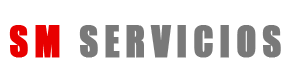
<style>
.page{position:relative;width:300px;height:80px;background:#ffffff}
.page>*{position:absolute;margin:0}
.t1{font:40px "Impact";letter-spacing:0.15em;color:#797979;font-weight:bold;scale:0.9 1}
.t2{font:40px "Impact";letter-spacing:0.15em;color:#e80000;font-weight:bold;scale:0.9 1}
</style>
<div class="page">
<p class="t1" style="left:9px;top:25px;width:272px;height:33px"><span class="t2">SM </span>SERVICIOS</p>
</div>
